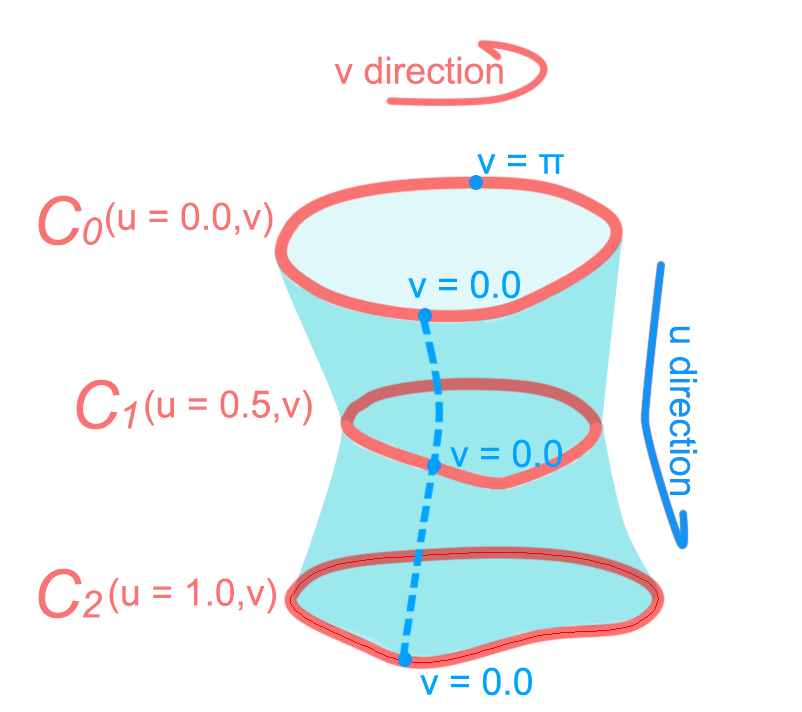
<style>
.page{position:relative;width:802px;height:712px;background:#ffffff}
.page>*{position:absolute;margin:0}
.t1{font:37.5px "ArialMT";color:#fa7373}
.t2{font:37.5px "ArialMT";color:#00a4ff}
.t3{font:66.7px "Arial-ItalicMT";color:#fa7373}
.t4{font:37.5px "Arial-ItalicMT";color:#fa7373}
.t5{font:37.5px "ArialMT";color:#1294f7}
.t6{font:37.5px "ArialMT";color:#f97273}
</style>
<div class="page">
<p class="t1" style="left:334px;top:56px;width:169px;height:28px">v direction</p>
<p class="t2" style="left:477px;top:154px;width:87px;height:20px">v = π</p>
<p class="t3" style="left:38px;top:195px;width:65px;height:51px">C<span class="t4">0</span></p>
<p class="t1" style="left:106px;top:202px;width:167px;height:36px">(u = 0.0,v)</p>
<p class="t2" style="left:408px;top:270px;width:112px;height:29px">v = 0.0</p>
<p class="t5" style="left:669px;top:326px;width:29px;height:169px;rotate:90deg">u direction</p>
<p class="t3" style="left:76px;top:379px;width:61px;height:51px">C<span class="t4">1</span></p>
<p class="t6" style="left:145px;top:390px;width:167px;height:36px">(u = 0.5,v)</p>
<p class="t2" style="left:450px;top:439px;width:112px;height:29px">v = 0.0</p>
<p class="t3" style="left:38px;top:568px;width:64px;height:51px">C<span class="t4">2</span></p>
<p class="t1" style="left:109px;top:578px;width:167px;height:36px">(u = 1.0,v)</p>
<p class="t2" style="left:420px;top:667px;width:112px;height:29px">v = 0.0</p>
</div>
